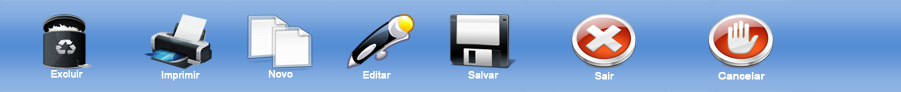
<style>
.page{position:relative;width:901px;height:92px}
.page>*{position:absolute;margin:0}
.t1{font:10px "ArialMT";color:#ffffff;font-weight:bold}
.t2{font:10px "ArialMT";color:#ffffff;font-weight:bold;scale:1.1 1}
</style>
<div class="page">
<p class="t1" style="left:51px;top:70px;width:32px;height:8px">Excluir</p>
<p class="t1" style="left:161px;top:71px;width:39px;height:10px">Imprimir</p>
<p class="t1" style="left:268px;top:70px;width:25px;height:8px">Novo</p>
<p class="t1" style="left:363px;top:71px;width:28px;height:8px">Editar</p>
<p class="t1" style="left:468px;top:71px;width:31px;height:8px">Salvar</p>
<p class="t1" style="left:595px;top:72px;width:19px;height:8px">Sair</p>
<p class="t2" style="left:718px;top:72px;width:47px;height:8px">Cancelar</p>
</div>
